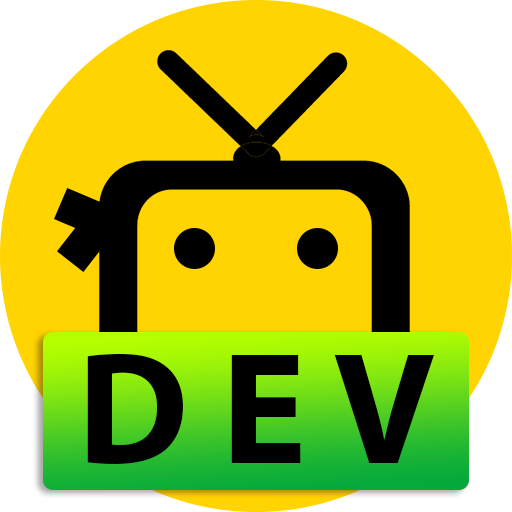
<style>
.page{position:relative;width:512px;height:512px;background:#ffd400}
.page>*{position:absolute;margin:0}
.t1{font:160px "MyriadPro-Bold";color:#000000}
</style>
<div class="page">
<p class="t1" style="left:87px;top:354px;width:347px;height:110px">D E V</p>
</div>
